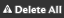
<style>
.page{position:relative;width:64px;height:18px;background:#333333}
.page>*{position:absolute;margin:0}
.t1{font:9.8px "AmiraParadiso";letter-spacing:0.05em;color:#ffffff}
</style>
<div class="page">
<p class="t1" style="left:15px;top:6px;width:47px;height:7px">Delete All</p>
</div>
